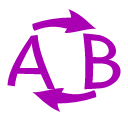
<style>
.page{position:relative;width:128px;height:128px;background:#ffffff}
.page>*{position:absolute;margin:0}
.t1{font:60px "MicrosoftYaHei";color:#aa00b3}
</style>
<div class="page">
<p class="t1" style="left:7px;top:33px;width:114px;height:57px">A B</p>
</div>
